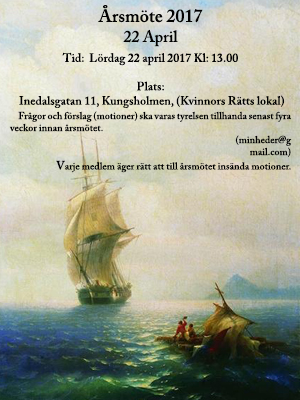
<style>
.page{position:relative;width:300px;height:400px}
.page>*{position:absolute;margin:0}
.t1{font:12px/10px "ACaslonPro-Semibold";color:#020202}
.t2{font:18px/10px "ACaslonPro-Semibold";color:#020202}
.t3{font:16px/10px "ACaslonPro-Semibold";color:#020202}
.t4{font:10px "ACaslonPro-Semibold";color:#020202}
.t5{font:12px "ACaslonPro-Semibold";color:#020202}
</style>
<div class="page">
<p class="t1" style="left:62px;top:5px;width:176px;height:61px;text-align:center"><span class="t2">Årsmöte 2017 <br></span><span class="t3"><br>22 April<br><br></span>Tid:  Lördag 22 april 2017 Kl: 13.00</p>
<p class="t4" style="left:9px;top:81px;width:283px;height:92px;text-align:center"><span class="t1"><br> <br></span><span class="t5">Plats:<br> Inedalsgatan 11, Kungsholmen, (Kvinnors Rätts lokal)<br>    </span>Frågor och förslag (motioner) ska varas tyrelsen tillhanda senast fyra                veckor innan årsmötet. <br>(minheder@g<br>mail.com) <br><span class="t5">V</span>arje medlem äger rätt att till årsmötet insända motioner.</p>
</div>
